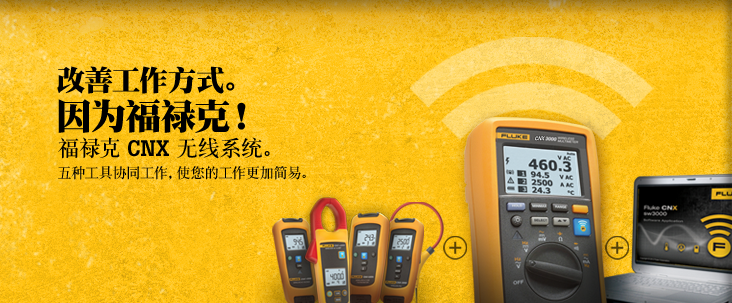
<style>
.page{position:relative;width:732px;height:303px}
.page>*{position:absolute;margin:0}
.t1{font:29px "DFPSongW12";letter-spacing:-0.005em;color:#000000;text-transform:uppercase}
.t2{font:36px "DFPSongW12";letter-spacing:-0.005em;color:#000000;text-transform:uppercase}
.t3{font:14.5px "DFPSongW7";letter-spacing:-0.01em;color:#000000}
.t4{font:22.4px "DFPSongW7";letter-spacing:-0.01em;color:#000000}
.t5{font:22.4px "BotonPro-Medium";letter-spacing:-0.01em;color:#000000}
</style>
<div class="page">
<p class="t1" style="left:57px;top:66px;width:178px;height:28px">改善工作方式。</p>
<p class="t2" style="left:58px;top:99px;width:188px;height:34px">因为福禄克！</p>
<p class="t3" style="left:58px;top:137px;width:248px;height:43px"><span class="t4">福禄克</span><span class="t5"> CNX </span><span class="t4">无线系统。<br></span>五种工具协同工作，使您的工作更加简易。</p>
</div>
